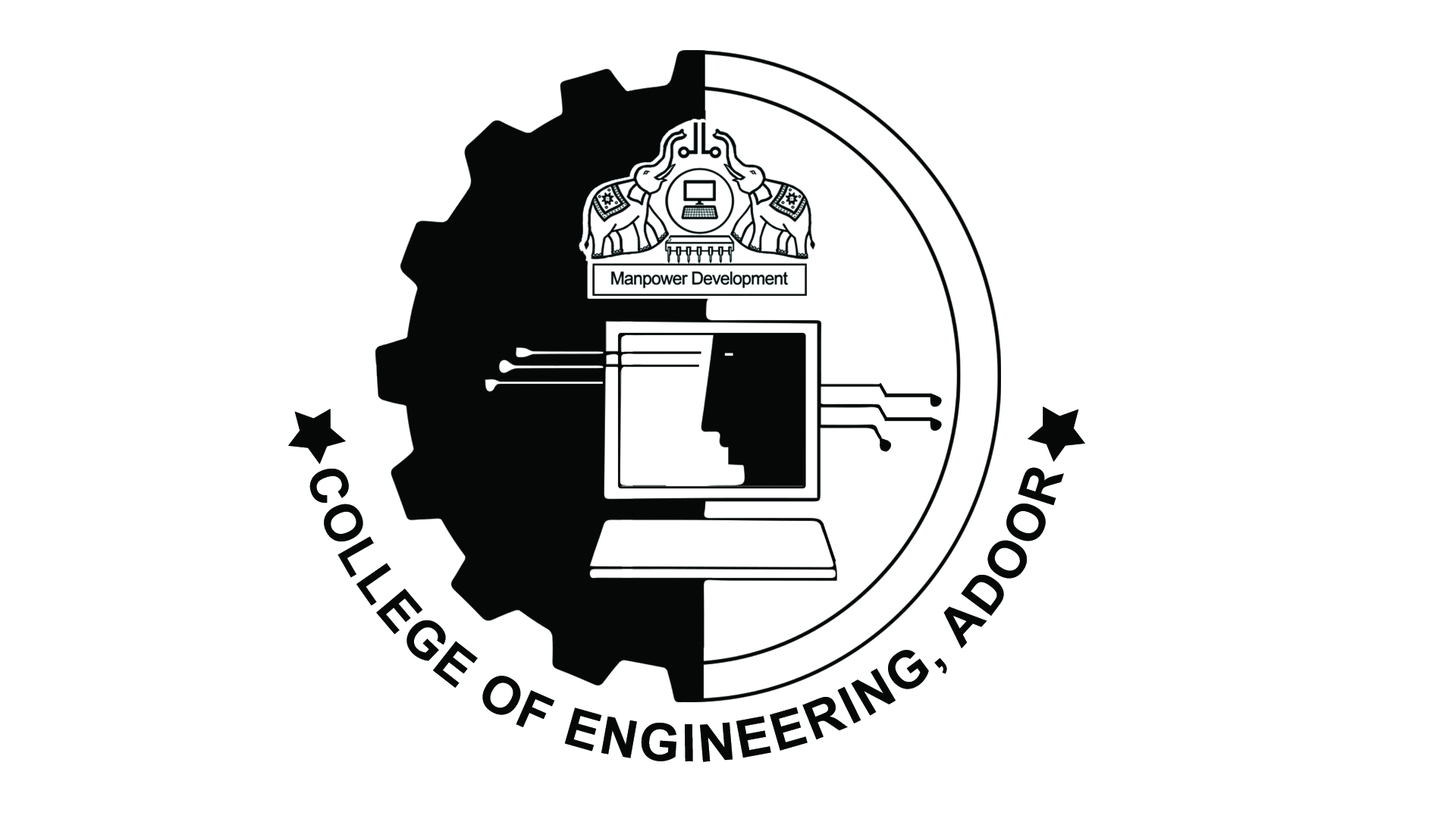
<style>
.page{position:relative;width:1456px;height:819px;background:#ffffff}
.page>*{position:absolute;margin:0}
.t1{font:51.8px "Arial-BoldMT";letter-spacing:0.06em;color:#060808}
</style>
<div class="page">
<p class="t1" style="left:309px;top:467px;width:755px;height:295px;text-align:center">COLLEGE OF ENGINEERING, ADOOR</p>
</div>
